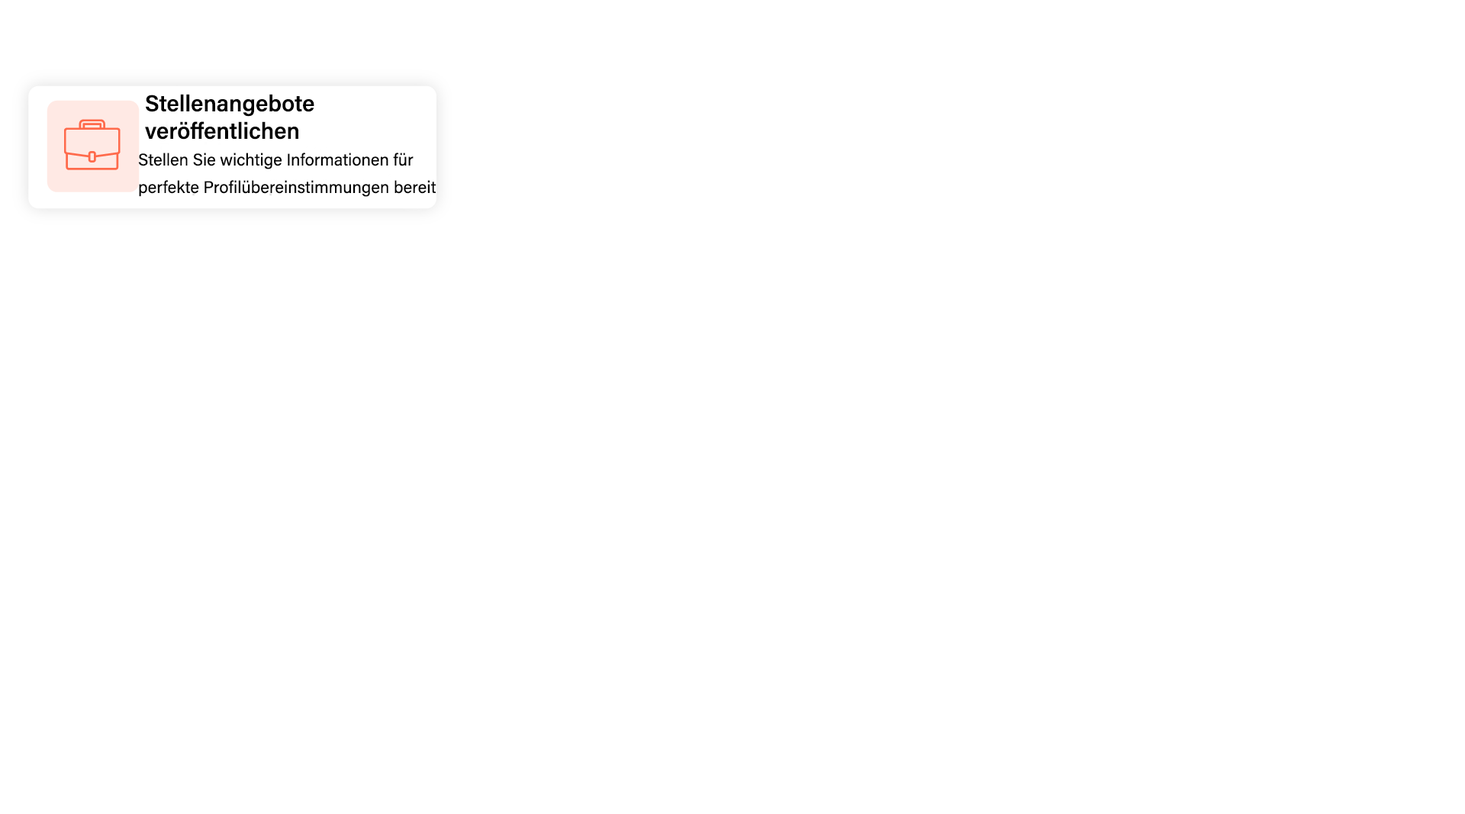
<style>
.page{position:relative;width:1465px;height:814px;background:#ffffff}
.page>*{position:absolute;margin:0}
.t1{font:22.9px/13.7px "AcuminConcept_578.000wght";color:#000000}
.t2{font:16.8px/13.7px "AcuminConcept-Regular";color:#000000}
</style>
<div class="page">
<p class="t1" style="left:145px;top:94px;width:169px;height:46px">Stellenangebote <br><br>veröffentlichen</p>
<p class="t2" style="left:138px;top:153px;width:298px;height:44px">Stellen Sie wichtige Informationen für <br><br>perfekte Profilübereinstimmungen bereit</p>
</div>
